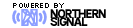
<style>
.page{position:relative;width:133px;height:28px;background:#ffffff}
.page>*{position:absolute;margin:0}
.t1{font:8px "Silkscreen";letter-spacing:-0.075em;color:#000000}
.t2{font:24px "NorthernSignalLogo";letter-spacing:-0.075em;color:#8c9eff}
.t3{font:12px/8px "NorthernSignalLogo";letter-spacing:-0.075em;color:#000000}
</style>
<div class="page">
<p class="t1" style="left:13px;top:3px;width:51px;height:5px">POWERED BY</p>
<p class="t2" style="left:12px;top:9px;width:35px;height:17px">$</p>
<p class="t3" style="left:50px;top:9px;width:56px;height:17px">NORTHERN<br>SIGNAL</p>
</div>
